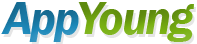
<style>
.page{position:relative;width:197px;height:44px;background:#ffffff}
.page>*{position:absolute;margin:0}
.t1{font:48.2px "FranklinGothic-DemiItalic";letter-spacing:-0.05em;color:#78b012}
.t2{font:48.2px "FranklinGothic-DemiItalic";letter-spacing:-0.05em;color:#1c88b9}
</style>
<div class="page">
<p class="t1" style="left:1px;top:2px;width:193px;height:40px"><span class="t2">App</span>Young</p>
</div>
